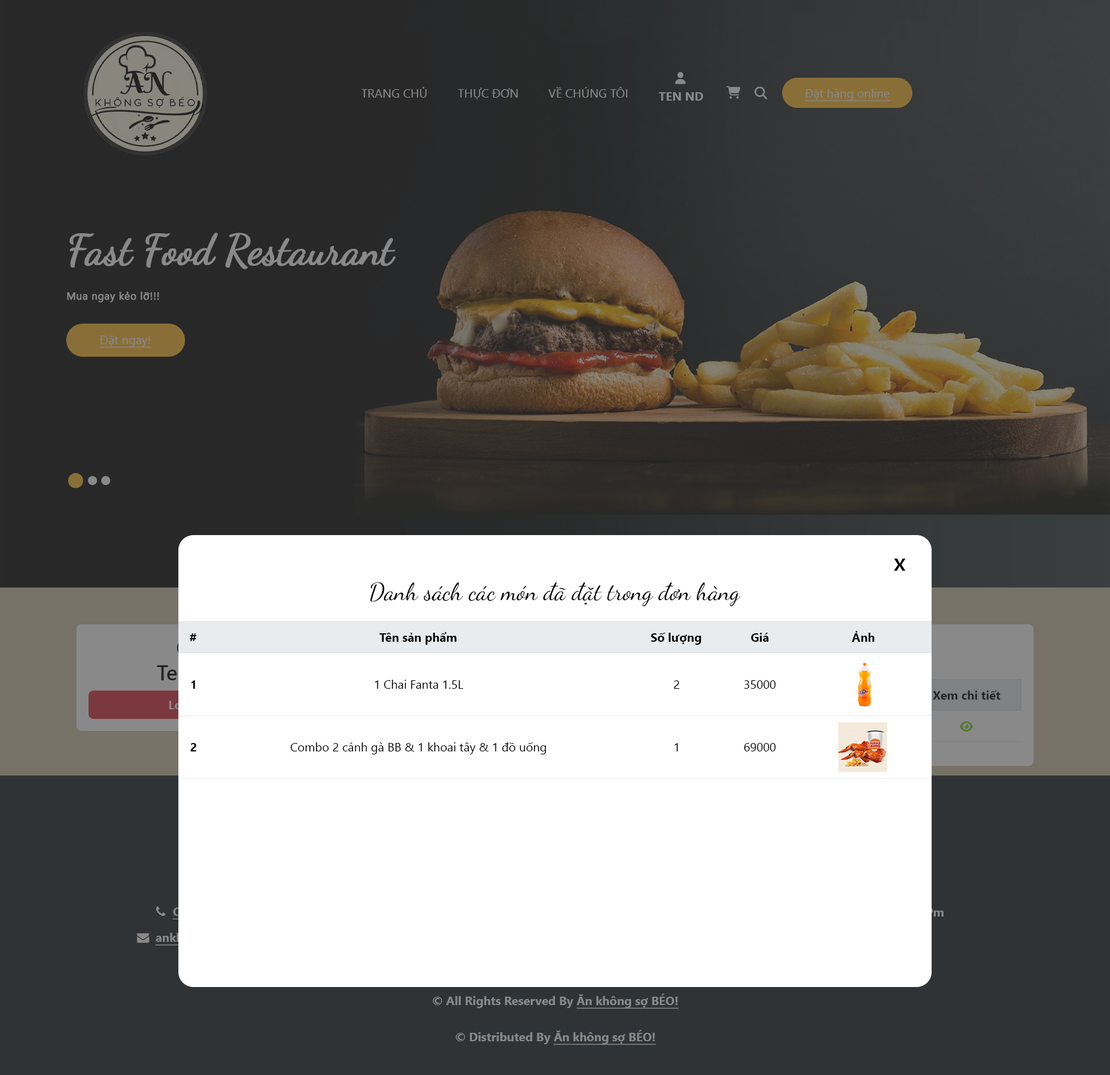
<style>
.page{position:relative;width:1110px;height:1075px;background:#ffffff}
.page>*{position:absolute;margin:0}
.t1{font:12px "SegoeUI";color:#898989}
.t2{font:12px "SegoeUI";color:#898989;text-decoration:underline}
.t3{font:12px "SegoeUI-Bold";color:#898989}
.t4{font:42.2px "DancingScript-Regular";letter-spacing:-0.02em;color:#898989;font-weight:bold}
.t5{font:10.2px "SegoeUI";letter-spacing:0.023em;color:#898989;font-weight:bold}
.t6{font:24.1px "SegoeUI-Semibold";color:#000000}
.t7{font:24.1px "DancingScript-Regular";letter-spacing:0.003em;color:#000000}
.t8{font:12px "SegoeUI-Bold";color:#000000}
.t9{font:12px "SegoeUI";color:#000000}
.t10{font:12px "SegoeUI-Bold";color:#232323}
.t11{font:12px "SegoeUI-Bold";color:#898989;text-decoration:underline}
</style>
<div class="page">
<p class="t1" style="left:361px;top:87px;width:65px;height:11px">TRANG CHỦ</p>
<p class="t1" style="left:458px;top:87px;width:59px;height:12px">THỰC ĐƠN</p>
<p class="t1" style="left:548px;top:87px;width:79px;height:11px">VỀ CHÚNG TÔI</p>
<p class="t2" style="left:804px;top:89px;width:86px;height:12px">Đặt hàng online</p>
<p class="t3" style="left:658px;top:92px;width:45px;height:9px">TEN ND</p>
<p class="t4" style="left:69px;top:233px;width:327px;height:36px">Fast Food Restaurant</p>
<p class="t5" style="left:67px;top:292px;width:92px;height:10px">Mua ngay kẻo lỡ!!!</p>
<p class="t2" style="left:99px;top:336px;width:52px;height:12px">Đặt ngay!</p>
<p class="t6" style="left:893px;top:558px;width:12px;height:12px">x</p>
<p class="t7" style="left:370px;top:582px;width:370px;height:25px">Danh sách các món đã đặt trong đơn hàng</p>
<p class="t8" style="left:189px;top:633px;width:7px;height:8px">#</p>
<p class="t8" style="left:379px;top:632px;width:78px;height:13px">Tên sản phẩm</p>
<p class="t8" style="left:651px;top:633px;width:50px;height:12px">Số lượng</p>
<p class="t8" style="left:751px;top:633px;width:18px;height:9px">Giá</p>
<p class="t8" style="left:851px;top:631px;width:23px;height:11px">Ảnh</p>
<p class="t8" style="left:191px;top:680px;width:4px;height:9px">1</p>
<p class="t9" style="left:375px;top:679px;width:88px;height:10px">1 Chai Fanta 1.5L</p>
<p class="t9" style="left:673px;top:680px;width:6px;height:9px">2</p>
<p class="t9" style="left:744px;top:680px;width:32px;height:9px">35000</p>
<p class="t10" style="left:932px;top:690px;width:68px;height:9px">Xem chi tiết</p>
<p class="t8" style="left:190px;top:743px;width:6px;height:8px">2</p>
<p class="t9" style="left:290px;top:742px;width:256px;height:12px">Combo 2 cánh gà BB &amp; 1 khoai tây &amp; 1 đồ uống</p>
<p class="t9" style="left:674px;top:743px;width:4px;height:8px">1</p>
<p class="t9" style="left:744px;top:743px;width:32px;height:8px">69000</p>
<p class="t3" style="left:433px;top:993px;width:245px;height:15px">© All Rights Reserved By <span class="t11">Ăn không sợ BÉO!</span></p>
<p class="t3" style="left:455px;top:1029px;width:201px;height:16px">© Distributed By <span class="t11">Ăn không sợ BÉO!</span></p>
</div>
